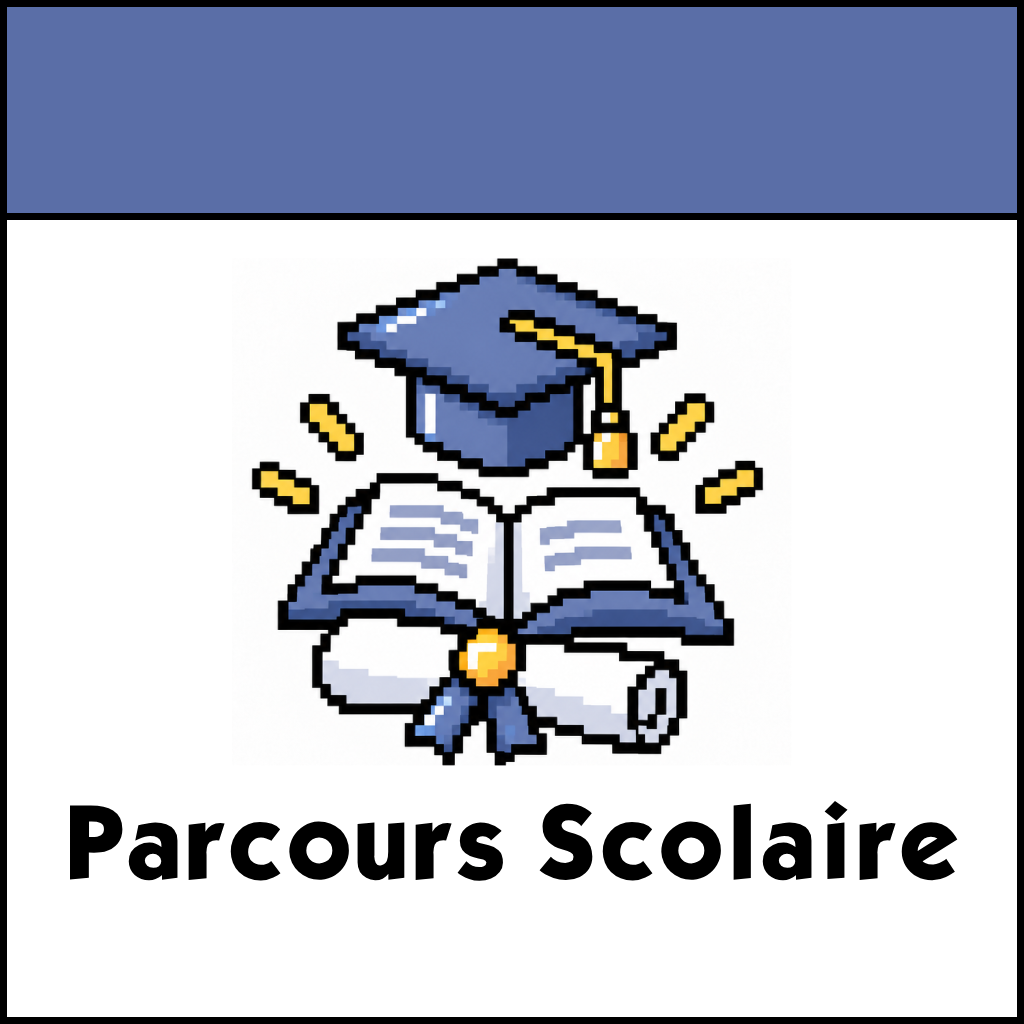
<style>
.page{position:relative;width:1024px;height:1024px;background:#ffffff}
.page>*{position:absolute;margin:0}
.t1{font:90px "KabelBdNormal";color:#000000}
</style>
<div class="page">
<p class="t1" style="left:70px;top:800px;width:888px;height:81px">Parcours Scolaire</p>
</div>
